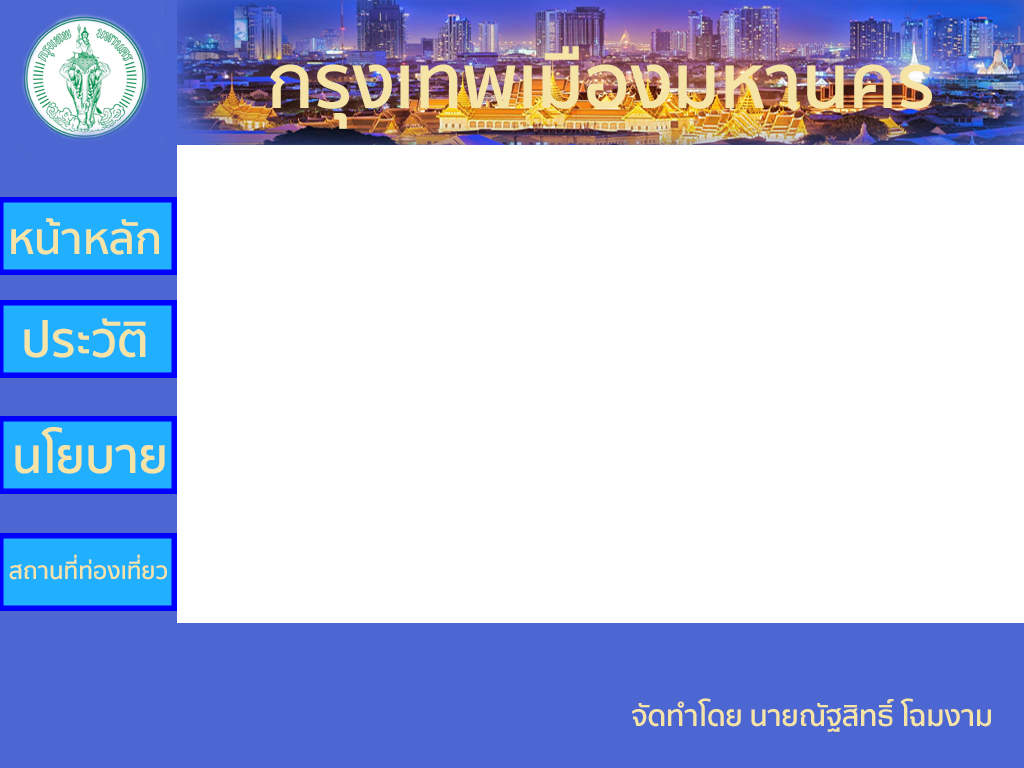
<style>
.page{position:relative;width:1024px;height:768px;background:#ffffff}
.page>*{position:absolute;margin:0}
.t1{font:76px "SukhumvitSet-SemiBold";color:#f6e4a7}
.t2{font:44.2px "SukhumvitSet-SemiBold";color:#f6e4a7}
.t3{font:49.1px "SukhumvitSet-SemiBold";color:#f6e4a7}
.t4{font:23.9px "SukhumvitSet-SemiBold";color:#f6e4a7}
.t5{font:29.5px "SukhumvitSet-SemiBold";color:#f6e4a7}
</style>
<div class="page">
<p class="t1" style="left:270px;top:46px;width:662px;height:83px">กรุงเทพเมืองมหานคร</p>
<p class="t2" style="left:11px;top:218px;width:148px;height:37px">หน้าหลัก</p>
<p class="t3" style="left:24px;top:318px;width:122px;height:40px">ประวัติ</p>
<p class="t3" style="left:15px;top:427px;width:150px;height:47px">นโยบาย</p>
<p class="t4" style="left:9px;top:554px;width:158px;height:26px">สถานที่ท่องเที่ยว</p>
<p class="t5" style="left:631px;top:698px;width:360px;height:34px">จัดทำโดย นายณัฐสิทธิ์ โฉมงาม</p>
</div>
